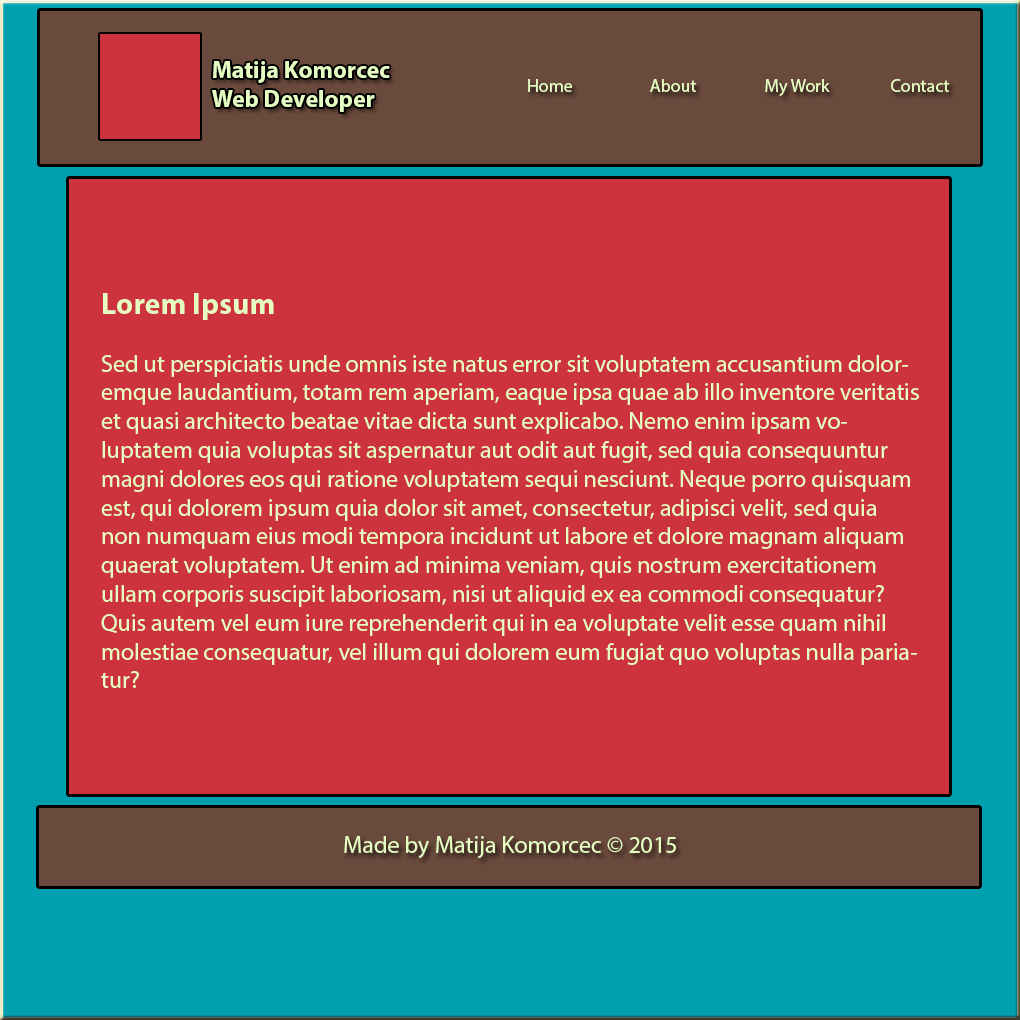
<style>
.page{position:relative;width:1020px;height:1020px;background:#cc333f}
.page>*{position:absolute;margin:0}
.t1{font:24px "MyriadPro-Bold";color:#e5fcc2}
.t2{font:18px "MyriadPro-Regular";color:#e5fcc2}
.t3{font:24px "MyriadPro-Regular";color:#e5fcc2}
.t4{font:30px "MyriadPro-Bold";color:#e5fcc2}
</style>
<div class="page">
<p class="t1" style="left:212px;top:61px;width:178px;height:51px">Matija Komorcec<br>Web Developer</p>
<p class="t2" style="left:528px;top:79px;width:44px;height:13px">Home</p>
<p class="t2" style="left:650px;top:79px;width:47px;height:13px">About</p>
<p class="t2" style="left:765px;top:79px;width:65px;height:17px">My Work</p>
<p class="t2" style="left:891px;top:79px;width:59px;height:13px">Contact</p>
<p class="t3" style="left:101px;top:293px;width:818px;height:395px"><span class="t4">Lorem Ipsum<br></span><br>Sed ut perspiciatis unde omnis iste natus error sit voluptatem accusantium doloremque laudantium, totam rem aperiam, eaque ipsa quae ab illo inventore veritatis et quasi architecto beatae vitae dicta sunt explicabo. Nemo enim ipsam voluptatem quia voluptas sit aspernatur aut odit aut fugit, sed quia consequuntur magni dolores eos qui ratione voluptatem sequi nesciunt. Neque porro quisquam est, qui dolorem ipsum quia dolor sit amet, consectetur, adipisci velit, sed quia non numquam eius modi tempora incidunt ut labore et dolore magnam aliquam quaerat voluptatem. Ut enim ad minima veniam, quis nostrum exercitationem ullam corporis suscipit laboriosam, nisi ut aliquid ex ea commodi consequatur? Quis autem vel eum iure reprehenderit qui in ea voluptate velit esse quam nihil molestiae consequatur, vel illum qui dolorem eum fugiat quo voluptas nulla pariatur?</p>
<p class="t3" style="left:344px;top:836px;width:332px;height:22px">Made by Matija Komorcec © 2015</p>
</div>
